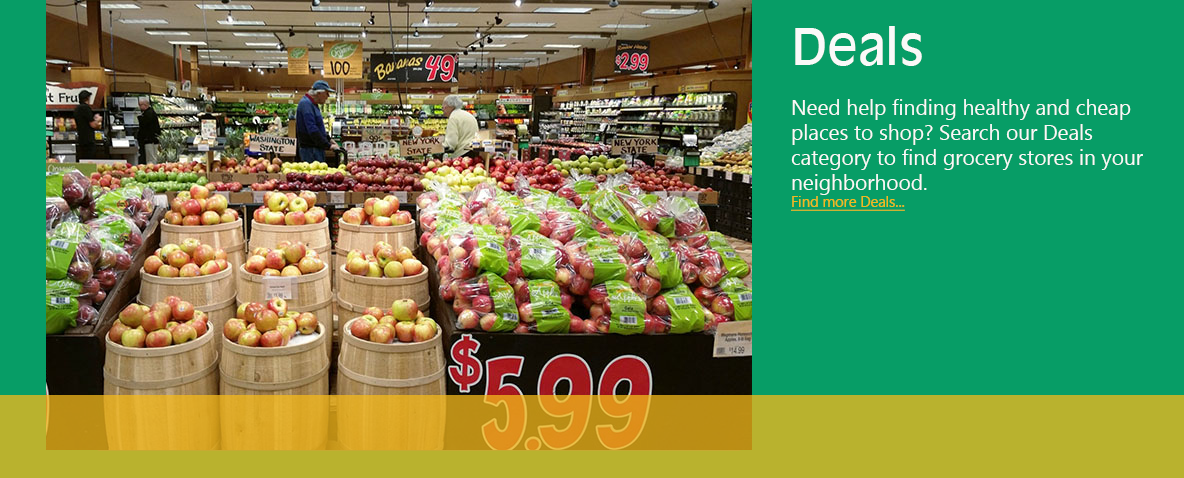
<style>
.page{position:relative;width:1184px;height:478px;background:#079d66}
.page>*{position:absolute;margin:0}
.t1{font:20.8px "MicrosoftTaiLe";color:#faf9f8}
.t2{font:50px "AntiqueOlive-Roman";color:#faf9f8}
.t3{font:14.6px "MicrosoftTaiLe";color:#f4b91b;text-decoration:underline}
</style>
<div class="page">
<p class="t1" style="left:791px;top:26px;width:352px;height:185px"><span class="t2">Deals<br></span><br>Need help finding healthy and cheap places to shop? Search our Deals category to find grocery stores in your neighborhood.<br><span class="t3">Find more Deals...</span></p>
</div>
